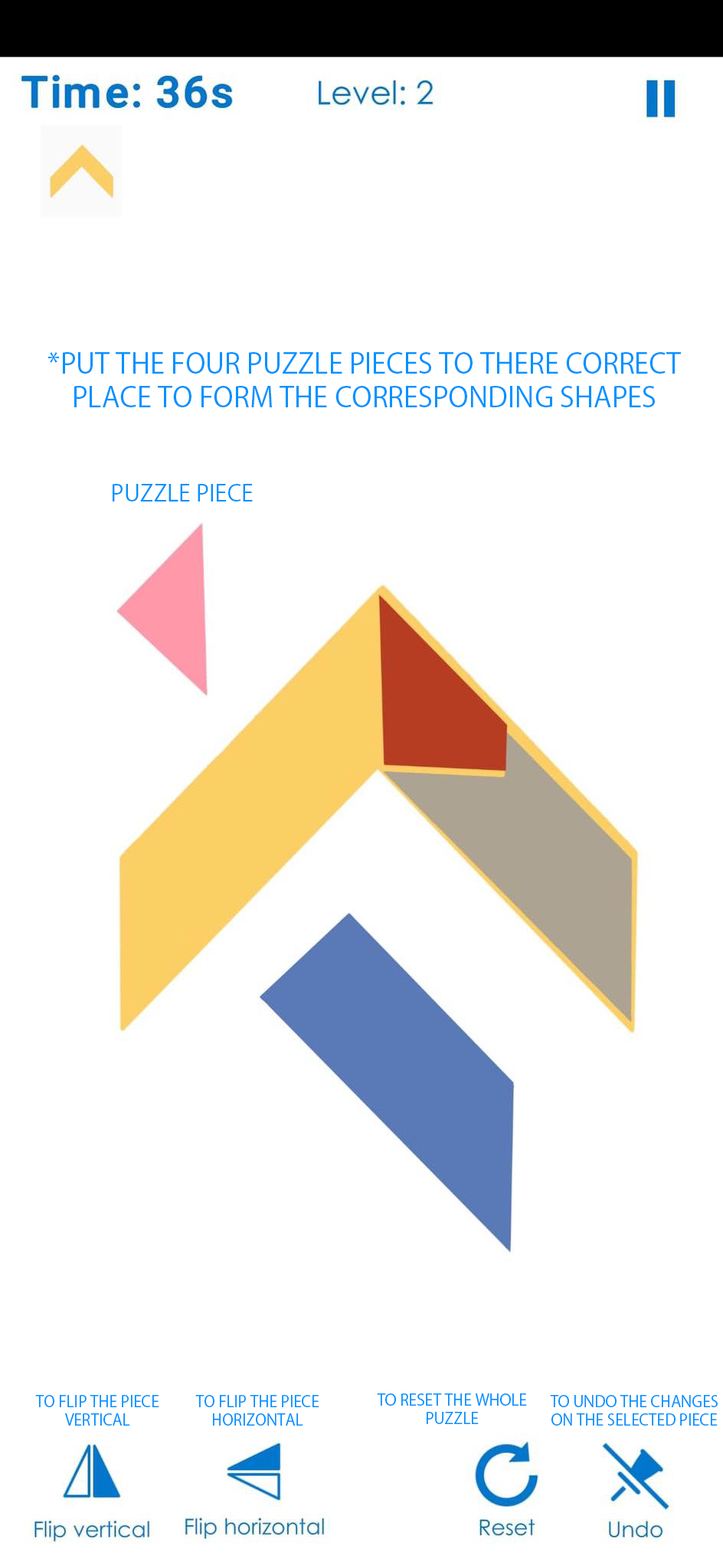
<style>
.page{position:relative;width:723px;height:1568px;background:#ffffff}
.page>*{position:absolute;margin:0}
.t1{font:27.6px "KozGoPr6N-Regular";color:#0091ff}
.t2{font:23px "KozGoPr6N-Regular";color:#0091ff}
.t3{font:15.3px "KozGoPr6N-Regular";color:#0091ff}
</style>
<div class="page">
<p class="t1" style="left:48px;top:352px;width:633px;height:55px;text-align:center">*PUT THE FOUR PUZZLE PIECES TO THERE CORRECT PLACE TO FORM THE CORRESPONDING SHAPES</p>
<p class="t2" style="left:113px;top:484px;width:140px;height:17px">PUZZLE PIECE</p>
<p class="t3" style="left:35px;top:1395px;width:124px;height:31px;text-align:center">TO FLIP THE PIECE VERTICAL</p>
<p class="t3" style="left:195px;top:1395px;width:124px;height:31px;text-align:center">TO FLIP THE PIECE HORIZONTAL</p>
<p class="t3" style="left:377px;top:1393px;width:150px;height:31px;text-align:center">TO RESET THE WHOLE PUZZLE</p>
<p class="t3" style="left:550px;top:1395px;width:167px;height:31px;text-align:center">TO UNDO THE CHANGES ON THE SELECTED PIECE</p>
</div>
